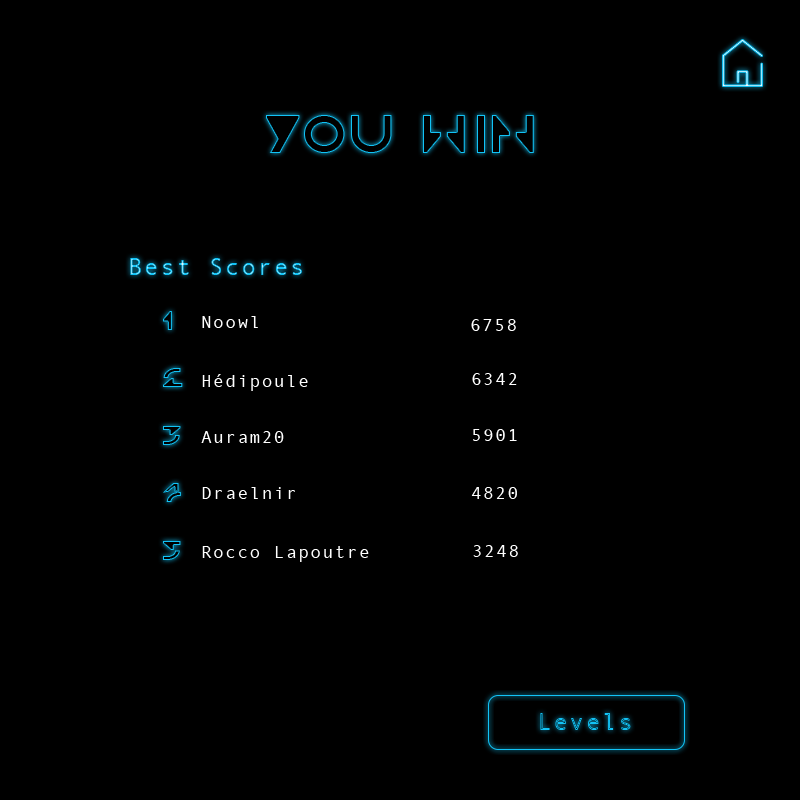
<style>
.page{position:relative;width:800px;height:800px;background:#000000}
.page>*{position:absolute;margin:0}
.t1{font:24px "AndaleMono";letter-spacing:0.075em}
.t2{font:24px "CRRNTN-Regular";letter-spacing:0.075em}
.t3{font:18px "AndaleMono";letter-spacing:0.075em;color:#ffffff}
</style>
<div class="page">
<p class="t1" style="left:130px;top:258px;width:172px;height:17px">Best Scores</p>
<p class="t2" style="left:163px;top:311px;width:20px;height:249px">1<br><br>2<br><br>3<br><br>4<br><br>5</p>
<p class="t3" style="left:202px;top:316px;width:56px;height:12px">Noowl</p>
<p class="t3" style="left:471px;top:319px;width:45px;height:12px">6758</p>
<p class="t3" style="left:202px;top:374px;width:106px;height:17px">Hédipoule</p>
<p class="t3" style="left:472px;top:373px;width:45px;height:12px">6342</p>
<p class="t3" style="left:201px;top:431px;width:83px;height:12px">Auram20</p>
<p class="t3" style="left:473px;top:429px;width:44px;height:12px">5901</p>
<p class="t3" style="left:202px;top:487px;width:93px;height:12px">Draelnir</p>
<p class="t3" style="left:471px;top:487px;width:46px;height:12px">4820</p>
<p class="t3" style="left:473px;top:545px;width:45px;height:12px">3248</p>
<p class="t3" style="left:202px;top:546px;width:167px;height:16px">Rocco Lapoutre</p>
<p class="t1" style="left:540px;top:713px;width:91px;height:17px">Levels</p>
</div>
